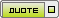
<style>
.page{position:relative;width:59px;height:18px;background:#7a7777}
.page>*{position:absolute;margin:0}
.t1{font:8px "BitDustTwo";color:#000000}
</style>
<div class="page">
<p class="t1" style="left:9px;top:8px;width:29px;height:5px">QUOTE</p>
</div>
